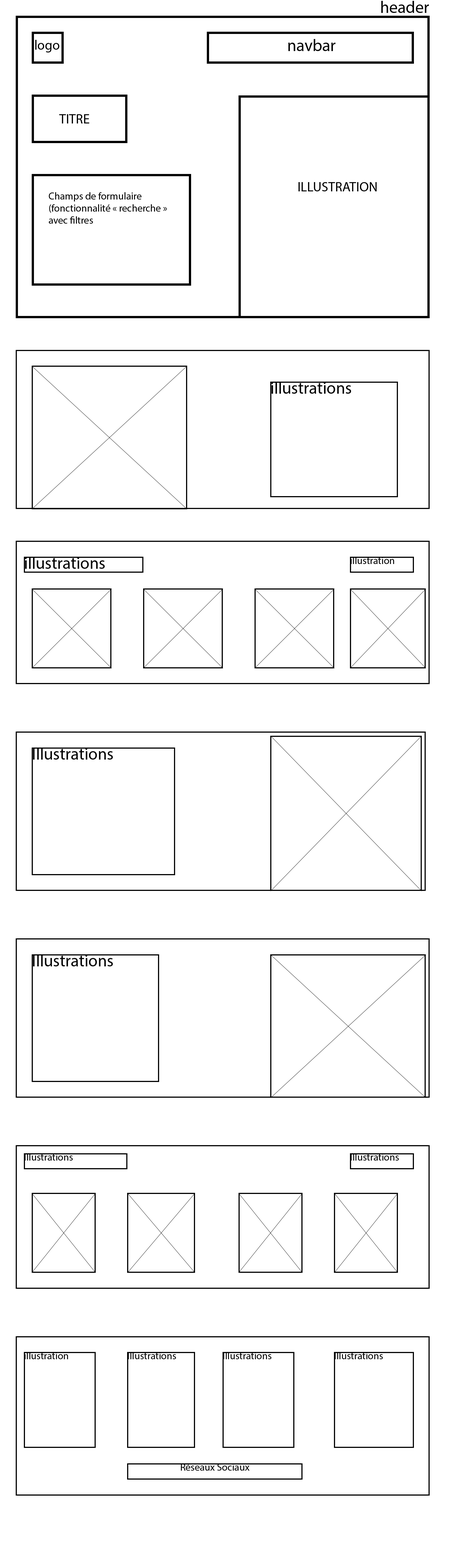
<style>
.page{position:relative;width:449px;height:1568px;background:#ffffff}
.page>*{position:absolute;margin:0}
.t1{font:16.8px "MyriadPro-Regular";color:#000000}
.t2{font:13.5px "MyriadPro-Regular";color:#000000}
.t3{font:10.1px "MyriadPro-Regular";color:#000000}
</style>
<div class="page">
<p class="t1" style="left:381px;top:1px;width:48px;height:12px">header</p>
<p class="t2" style="left:35px;top:40px;width:24px;height:12px">logo</p>
<p class="t1" style="left:288px;top:39px;width:48px;height:12px">navbar</p>
<p class="t2" style="left:59px;top:114px;width:30px;height:9px">TITRE</p>
<p class="t2" style="left:298px;top:182px;width:79px;height:9px">ILLUSTRATION</p>
<p class="t3" style="left:49px;top:192px;width:118px;height:32px">Champs de formulaire<br>(fonctionnalité « recherche » <br>avec filtres</p>
<p class="t1" style="left:271px;top:382px;width:80px;height:12px">illustrations</p>
<p class="t1" style="left:25px;top:557px;width:80px;height:12px">illustrations</p>
<p class="t3" style="left:350px;top:557px;width:44px;height:7px">illustration</p>
<p class="t1" style="left:33px;top:748px;width:80px;height:12px">Illustrations</p>
<p class="t1" style="left:33px;top:954px;width:80px;height:12px">Illustrations</p>
<p class="t3" style="left:24px;top:1153px;width:49px;height:8px">Illustrations</p>
<p class="t3" style="left:350px;top:1153px;width:49px;height:8px">Illustrations</p>
<p class="t3" style="left:24px;top:1352px;width:44px;height:7px">illustration</p>
<p class="t3" style="left:128px;top:1352px;width:48px;height:7px">Illustrations</p>
<p class="t3" style="left:223px;top:1352px;width:48px;height:7px">Illustrations</p>
<p class="t3" style="left:334px;top:1352px;width:49px;height:7px">Illustrations</p>
<p class="t3" style="left:181px;top:1464px;width:68px;height:7px">Réseaux Sociaux</p>
</div>
